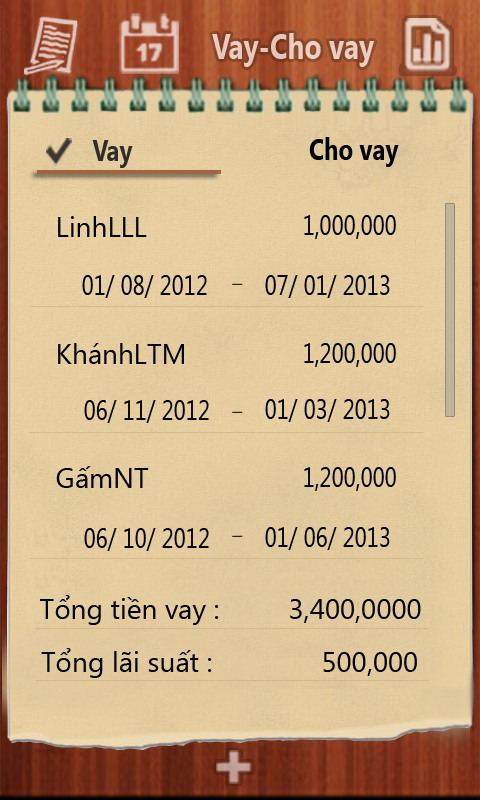
<style>
.page{position:relative;width:480px;height:800px}
.page>*{position:absolute;margin:0}
.t1{font:35px "SegoeUI-Bold";color:#e7cdc2;scale:0.8 1}
.t2{font:30px "SegoeUI-Bold";color:#000000;scale:0.8 1}
.t3{font:30px "SegoeUI-Bold";color:#302d2d;scale:0.8 1}
.t4{font:32.5px "SegoeUI-Bold";color:#302d2d;scale:0.8 1}
.t5{font:28px "SegoeUI";color:#000000}
.t6{font:28px "SegoeUI";color:#000000;scale:0.8 1}
</style>
<div class="page">
<p class="t1" style="left:212px;top:33px;width:163px;height:34px">Vay-Cho vay</p>
<p class="t2" style="left:309px;top:137px;width:90px;height:30px">Cho vay</p>
<p class="t3" style="left:92px;top:140px;width:41px;height:28px"><span class="t4"> </span>Vay</p>
<p class="t5" style="left:58px;top:216px;width:89px;height:21px">LinhLLL</p>
<p class="t6" style="left:304px;top:215px;width:92px;height:24px">1,000,000</p>
<p class="t6" style="left:82px;top:275px;width:125px;height:23px">01/ 08/ 2012</p>
<p class="t6" style="left:265px;top:275px;width:125px;height:23px">07/ 01/ 2013</p>
<p class="t5" style="left:58px;top:343px;width:126px;height:21px">KhánhLTM</p>
<p class="t6" style="left:304px;top:343px;width:92px;height:24px">1,200,000</p>
<p class="t6" style="left:84px;top:400px;width:125px;height:23px">06/ 11/ 2012</p>
<p class="t6" style="left:265px;top:399px;width:125px;height:23px">01/ 03/ 2013</p>
<p class="t5" style="left:56px;top:466px;width:93px;height:22px">GấmNT</p>
<p class="t6" style="left:304px;top:467px;width:92px;height:24px">1,200,000</p>
<p class="t6" style="left:84px;top:528px;width:125px;height:23px">06/ 10/ 2012</p>
<p class="t6" style="left:265px;top:527px;width:125px;height:23px">01/ 06/ 2013</p>
<p class="t5" style="left:40px;top:595px;width:381px;height:30px">Tổng tiền vay :         3,400,0000</p>
<p class="t5" style="left:41px;top:648px;width:171px;height:30px">Tổng lãi suất :</p>
<p class="t5" style="left:323px;top:652px;width:94px;height:24px">500,000</p>
</div>
